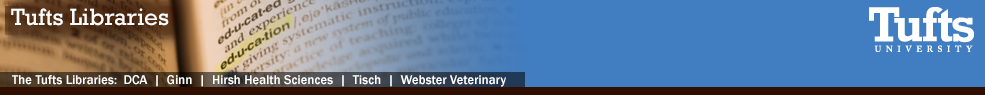
<style>
.page{position:relative;width:985px;height:95px;background:#417dc1}
.page>*{position:absolute;margin:0}
.t1{font:24px "Rockwell";color:#ffffff}
.t2{font:13px "FranklinGothic-Medium";color:#ffffff}
</style>
<div class="page">
<p class="t1" style="left:11px;top:8px;width:158px;height:18px">Tufts Libraries</p>
<p class="t2" style="left:12px;top:75px;width:494px;height:12px">The Tufts Libraries:  DCA  |  Ginn  |  Hirsh Health Sciences  |  Tisch  |  Webster Veterinary</p>
</div>
